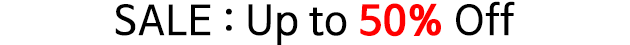
<style>
.page{position:relative;width:630px;height:45px;background:#ffffff}
.page>*{position:absolute;margin:0}
.t1{font:40px "NanumBarunGothic";color:#000000;font-weight:bold}
.t2{font:40px "NanumBarunGothicBold";color:#ff0000;font-weight:bold}
</style>
<div class="page">
<p class="t1" style="left:115px;top:1px;width:400px;height:44px">SALE : Up to <span class="t2">50%</span> Off</p>
</div>
